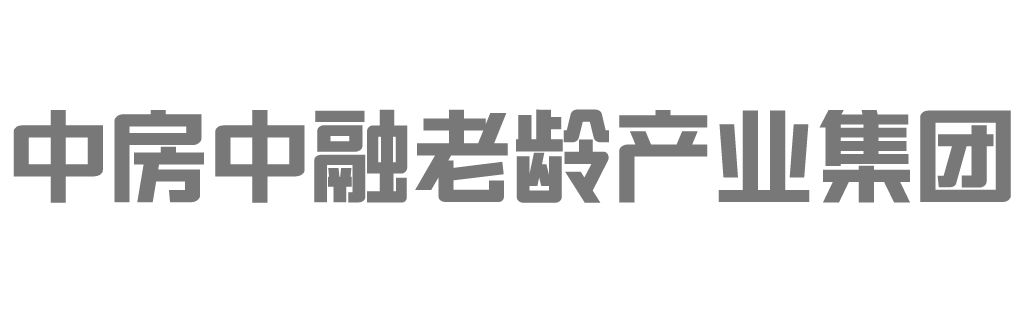
<style>
.page{position:relative;width:1024px;height:327px;background:#ffffff}
.page>*{position:absolute;margin:0}
.t1{font:96px "MFJianHei_Noncommercial-Regular";color:#777777}
</style>
<div class="page">
<p class="t1" style="left:13px;top:109px;width:998px;height:94px">中房中融老龄产业集团</p>
</div>
